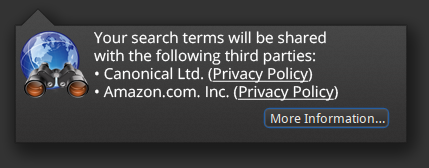
<style>
.page{position:relative;width:429px;height:168px}
.page>*{position:absolute;margin:0}
.t1{font:15px "OpenSans";color:#ffffff}
.t2{font:15px "OpenSans";color:#ffffff;text-decoration:underline}
</style>
<div class="page">
<p class="t1" style="left:94px;top:31px;width:244px;height:70px">Your search terms will be shared<br>with the following third parties:<br>• Canonical Ltd. (<span class="t2">Privacy Policy</span>)<br>• Amazon.com. Inc. (<span class="t2">Privacy Policy</span>)</p>
</div>
